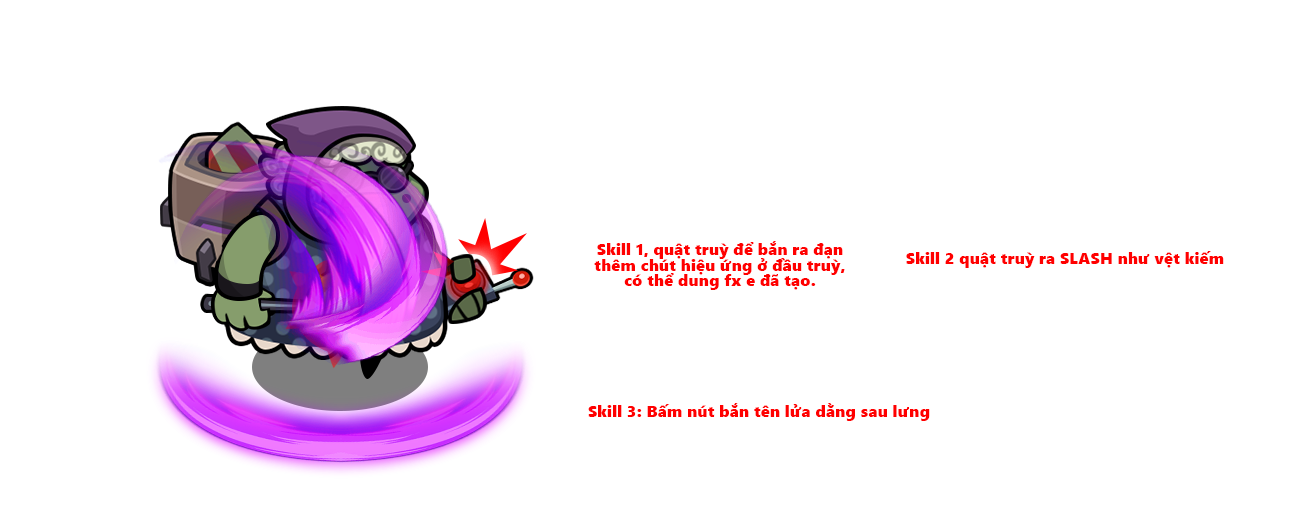
<style>
.page{position:relative;width:1299px;height:527px;background:#ffffff}
.page>*{position:absolute;margin:0}
.t1{font:16.4px/15.6px "SegoeUIBlack";color:#ff0000}
.t2{font:16.4px "SegoeUIBlack";color:#ff0000}
</style>
<div class="page">
<p class="t1" style="left:594px;top:241px;width:251px;height:49px;text-align:center">Skill 1, quật truỳ để bắn ra đạn<br>thêm chút hiệu ứng ở đầu truỳ,<br>có thể dung fx e đã tạo.</p>
<p class="t2" style="left:906px;top:251px;width:318px;height:17px">Skill 2 quật truỳ ra SLASH như vệt kiếm</p>
<p class="t2" style="left:588px;top:403px;width:342px;height:18px">Skill 3: Bấm nút bắn tên lửa dằng sau lưng</p>
</div>
